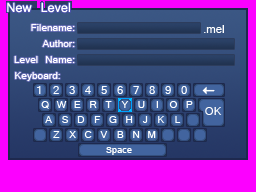
<style>
.page{position:relative;width:256px;height:192px;background:#fc00ff}
.page>*{position:absolute;margin:0}
.t1{font:20px "Kartika";color:#ffffff}
.t2{font:16px/8px "Kartika";color:#ffffff}
.t3{font:18px "Kartika";color:#ffffff}
</style>
<div class="page">
<p class="t1" style="left:7px;top:2px;width:63px;height:11px">New Level</p>
<p class="t2" style="left:14px;top:24px;width:61px;height:57px;text-align:right">Filename:<br><br>Author:<br><br>Level Name:<br><br>Keyboard:</p>
<p class="t3" style="left:204px;top:25px;width:20px;height:8px">.mel</p>
</div>
